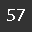
<style>
.page{position:relative;width:32px;height:32px;background:#333333}
.page>*{position:absolute;margin:0}
.t1{font:17.8px "MyriadPro-Regular";color:#ffffff;scale:1.12 1}
</style>
<div class="page">
<p class="t1" style="left:7px;top:9px;width:18px;height:12px">57</p>
</div>
